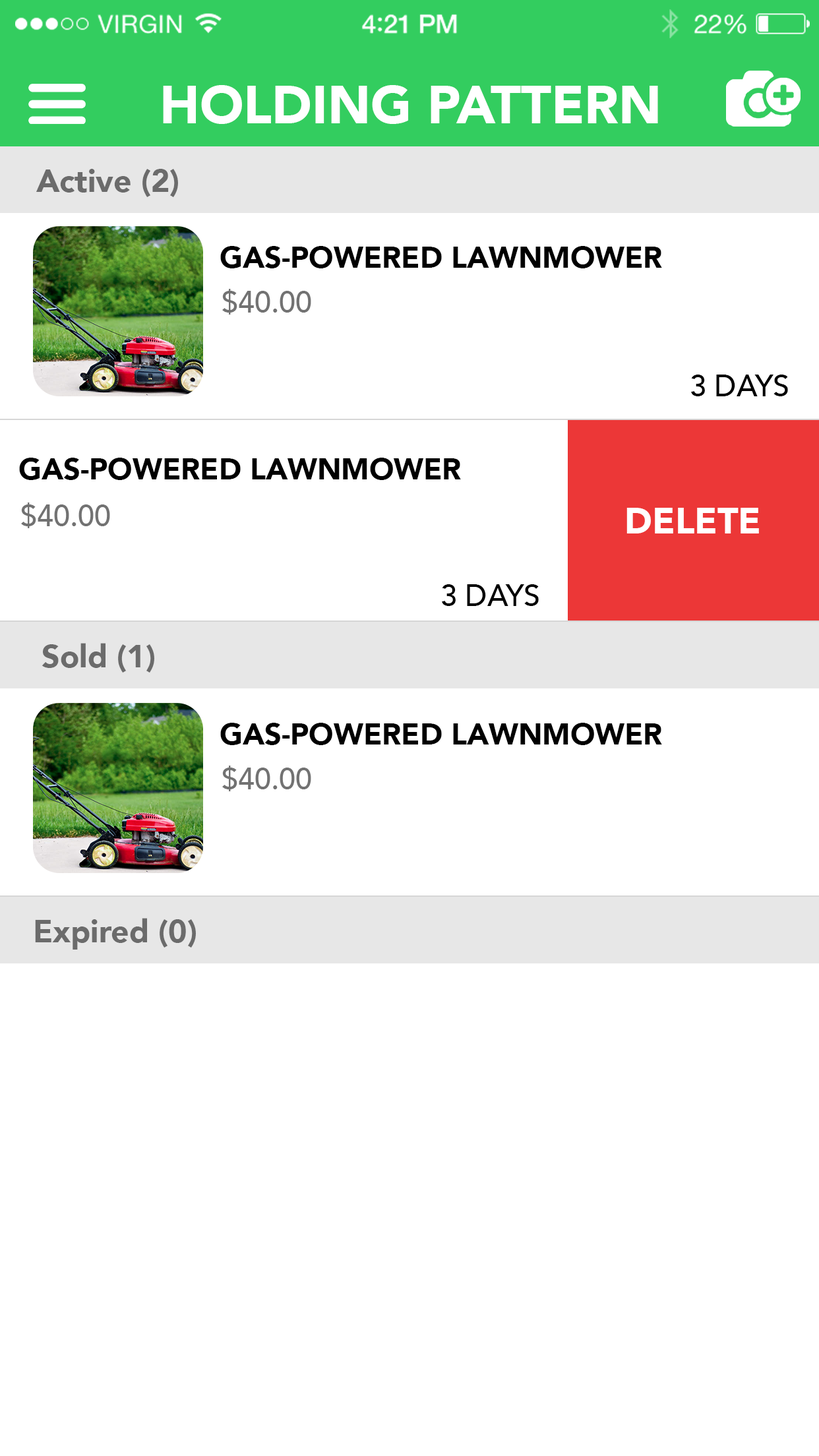
<style>
.page{position:relative;width:819px;height:1456px;background:#ffffff}
.page>*{position:absolute;margin:0}
.t1{font:52.8px "Avenir-Black";color:#ffffff}
.t2{font:31.7px "Avenir-Black";color:#6b6b6b}
.t3{font:29.7px "Avenir-Black";color:#000000}
.t4{font:29.7px "Avenir-Medium";color:#727272}
.t5{font:29.7px "Avenir-Medium";color:#000000}
.t6{font:36.3px "Avenir-Black";color:#ffffff}
</style>
<div class="page">
<p class="t1" style="left:163px;top:85px;width:495px;height:39px">HOLDING PATTERN</p>
<p class="t2" style="left:36px;top:169px;width:142px;height:28px">Active (2)</p>
<p class="t3" style="left:220px;top:246px;width:442px;height:22px">GAS-POWERED LAWNMOWER</p>
<p class="t4" style="left:222px;top:289px;width:89px;height:26px">$40.00</p>
<p class="t5" style="left:691px;top:375px;width:97px;height:21px">3 DAYS</p>
<p class="t3" style="left:19px;top:458px;width:442px;height:22px">GAS-POWERED LAWNMOWER</p>
<p class="t4" style="left:21px;top:502px;width:89px;height:26px">$40.00</p>
<p class="t6" style="left:626px;top:508px;width:133px;height:25px">DELETE</p>
<p class="t5" style="left:442px;top:584px;width:97px;height:22px">3 DAYS</p>
<p class="t2" style="left:42px;top:643px;width:112px;height:30px">Sold (1)</p>
<p class="t3" style="left:220px;top:723px;width:442px;height:22px">GAS-POWERED LAWNMOWER</p>
<p class="t4" style="left:222px;top:766px;width:89px;height:25px">$40.00</p>
<p class="t2" style="left:35px;top:918px;width:161px;height:32px">Expired (0)</p>
</div>
